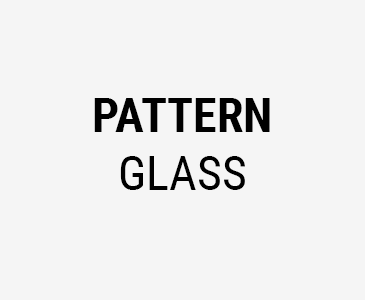
<style>
.page{position:relative;width:365px;height:300px;background:#f5f5f5}
.page>*{position:absolute;margin:0}
.t1{font:48px "RobotoCondensed-Bold";color:#000000}
.t2{font:48px "RobotoCondensed-Regular";color:#000000}
</style>
<div class="page">
<p class="t1" style="left:94px;top:98px;width:176px;height:92px;text-align:center">PATTERN<br><span class="t2">GLASS</span></p>
</div>
